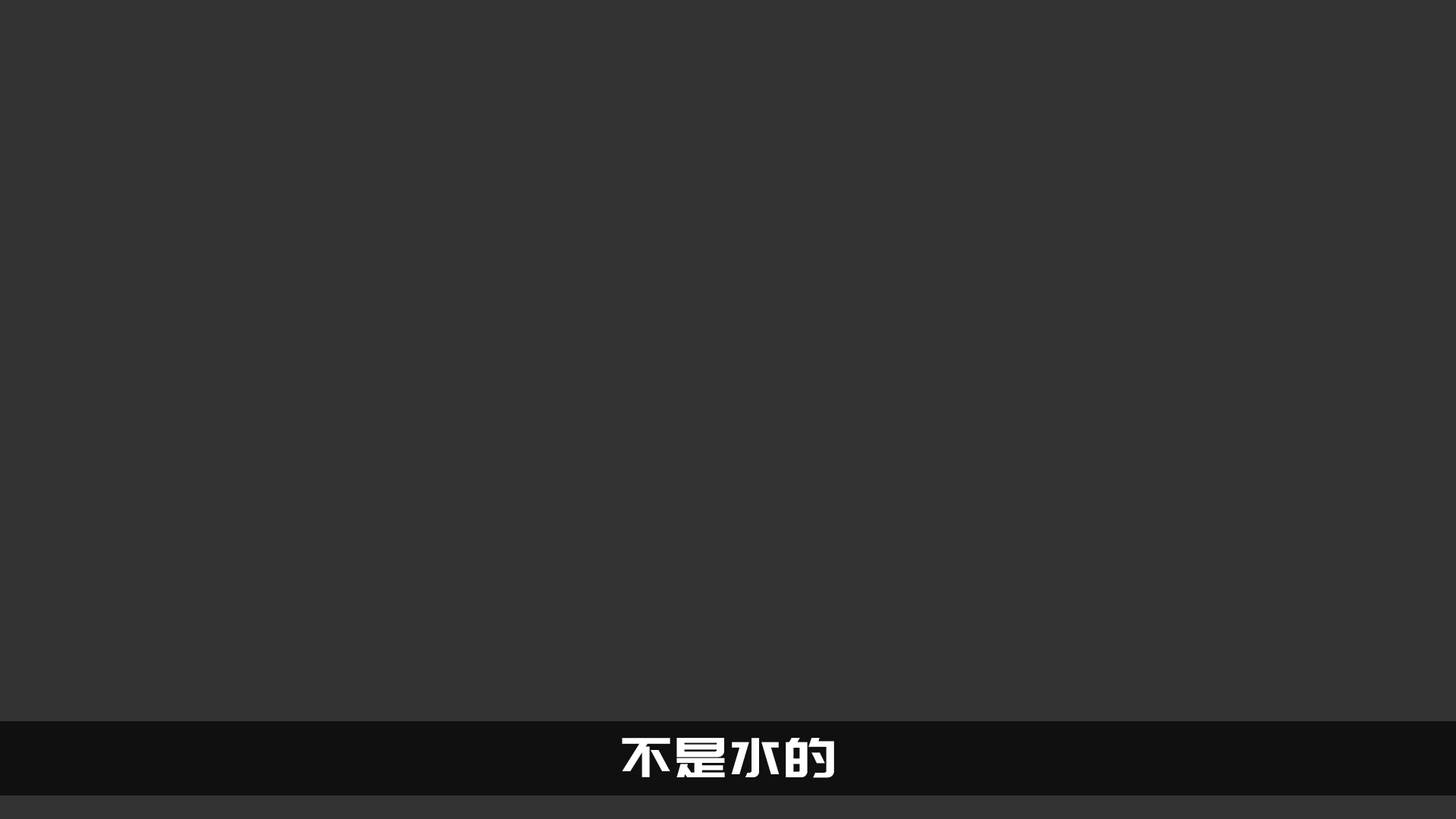
<style>
.page{position:relative;width:1456px;height:819px;background:#333333}
.page>*{position:absolute;margin:0}
.t1{font:54.6px "PangMenZhengDao-3";color:#ffffff}
</style>
<div class="page">
<p class="t1" style="left:622px;top:738px;width:212px;height:40px">不是水的</p>
</div>
